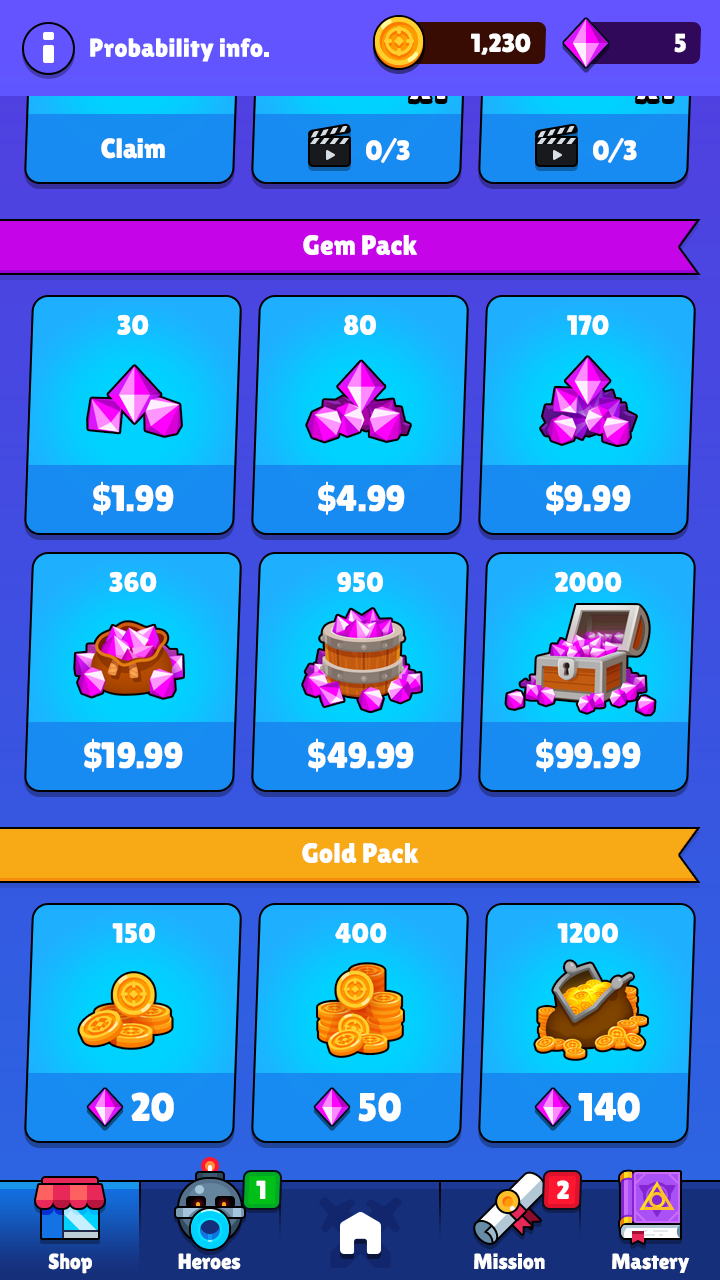
<style>
.page{position:relative;width:720px;height:1280px}
.page>*{position:absolute;margin:0}
.t1{font:26px "LilitaOne";color:#ffffff}
.t2{font:28px "LilitaOne";color:#ffffff}
.t3{font:36.7px "LilitaOne";color:#ffffff}
.t4{font:40px "LilitaOne";color:#ffffff}
</style>
<div class="page">
<p class="t1" style="left:90px;top:38px;width:179px;height:24px">Probability info.</p>
<p class="t2" style="left:101px;top:138px;width:64px;height:21px">Claim</p>
<p class="t2" style="left:366px;top:138px;width:44px;height:25px">0/3</p>
<p class="t2" style="left:593px;top:138px;width:44px;height:25px">0/3</p>
<p class="t2" style="left:303px;top:235px;width:115px;height:20px">Gem Pack</p>
<p class="t2" style="left:117px;top:314px;width:32px;height:21px">30</p>
<p class="t2" style="left:344px;top:315px;width:32px;height:20px">80</p>
<p class="t2" style="left:567px;top:315px;width:42px;height:20px">170</p>
<p class="t3" style="left:93px;top:481px;width:81px;height:34px">$1.99</p>
<p class="t3" style="left:318px;top:481px;width:87px;height:34px">$4.99</p>
<p class="t3" style="left:546px;top:481px;width:85px;height:34px">$9.99</p>
<p class="t2" style="left:109px;top:571px;width:48px;height:21px">360</p>
<p class="t2" style="left:337px;top:571px;width:46px;height:21px">950</p>
<p class="t2" style="left:555px;top:571px;width:67px;height:21px">2000</p>
<p class="t3" style="left:84px;top:738px;width:99px;height:34px">$19.99</p>
<p class="t3" style="left:308px;top:738px;width:106px;height:34px">$49.99</p>
<p class="t3" style="left:536px;top:738px;width:105px;height:34px">$99.99</p>
<p class="t2" style="left:302px;top:843px;width:117px;height:20px">Gold Pack</p>
<p class="t2" style="left:112px;top:923px;width:43px;height:20px">150</p>
<p class="t2" style="left:335px;top:923px;width:52px;height:20px">400</p>
<p class="t2" style="left:557px;top:922px;width:61px;height:21px">1200</p>
<p class="t4" style="left:131px;top:1092px;width:43px;height:30px">20</p>
<p class="t4" style="left:358px;top:1092px;width:43px;height:30px">50</p>
<p class="t4" style="left:578px;top:1092px;width:62px;height:30px">140</p>
</div>
